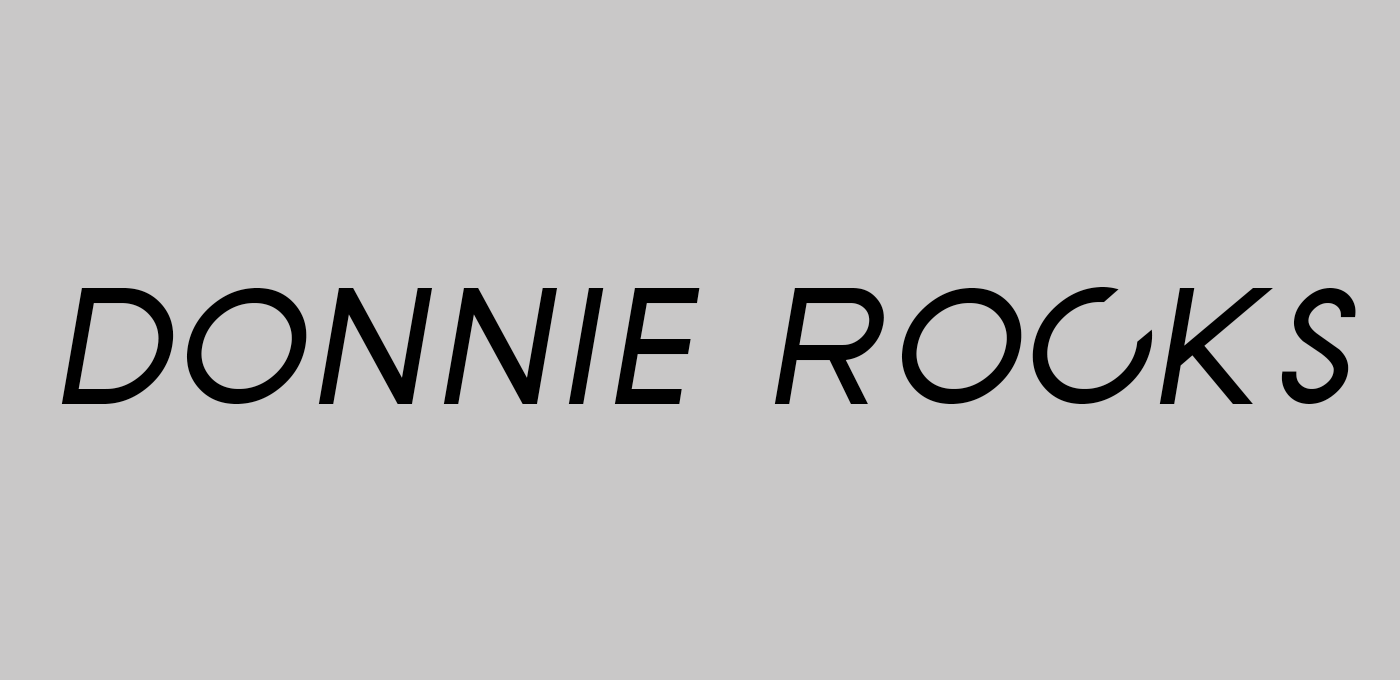
<style>
.page{position:relative;width:1400px;height:680px;background:#c9c8c8}
.page>*{position:absolute;margin:0}
.t1{font:175px "SFNewRepublicSCItalic";color:#000000}
</style>
<div class="page">
<p class="t1" style="left:61px;top:287px;width:1295px;height:117px">donnie rocks</p>
</div>
